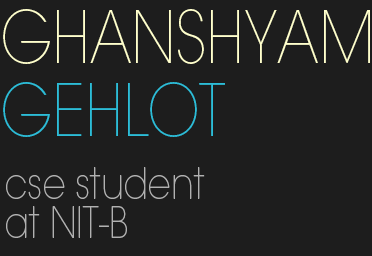
<style>
.page{position:relative;width:372px;height:256px;background:#1d1d1d}
.page>*{position:absolute;margin:0}
.t1{font:71.4px "ITCAvantGardeStd-XLt";color:#ffffcc;scale:0.84 1}
.t2{font:71.4px "ITCAvantGardeStd-XLt";color:#2cbdd8;scale:0.84 1}
.t3{font:42.8px "ITCAvantGardeStd-XLt";color:#b1b1b1;scale:0.84 1}
</style>
<div class="page">
<p class="t1" style="left:3px;top:9px;width:367px;height:55px">GHANSHYAM</p>
<p class="t2" style="left:3px;top:82px;width:222px;height:55px">GEHLOT</p>
<p class="t3" style="left:6px;top:167px;width:199px;height:32px">cse student</p>
<p class="t3" style="left:6px;top:206px;width:121px;height:32px">at NIT-B</p>
</div>
